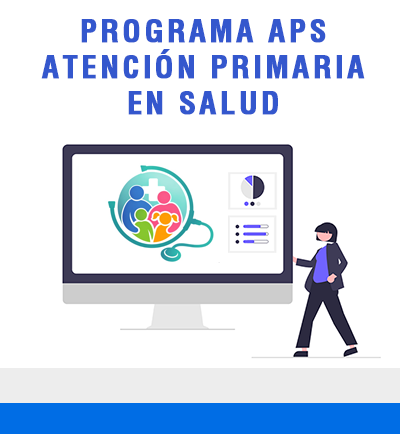
<style>
.page{position:relative;width:400px;height:434px;background:#ffffff}
.page>*{position:absolute;margin:0}
.t1{font:30px "Helvetica-Condensed-Bold";letter-spacing:0.1em;color:#3457cd;font-weight:bold}
</style>
<div class="page">
<p class="t1" style="left:41px;top:19px;width:324px;height:96px;text-align:center">PROGRAMA APS<br>ATENCIÓN PRIMARIA <br>EN SALUD</p>
</div>
